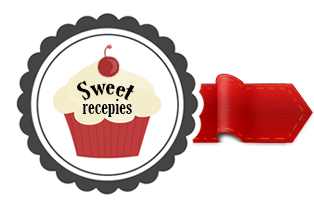
<style>
.page{position:relative;width:314px;height:211px;background:#ffffff}
.page>*{position:absolute;margin:0}
.t1{font:23.9px "GloucesterMT-ExtraCondensed";color:#000102}
.t2{font:21.5px "GloucesterMT-ExtraCondensed";color:#000102}
</style>
<div class="page">
<p class="t1" style="left:77px;top:80px;width:58px;height:21px">Sweet</p>
<p class="t2" style="left:82px;top:99px;width:50px;height:18px">recepies</p>
</div>
